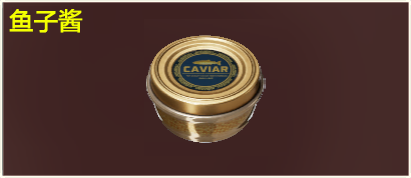
<style>
.page{position:relative;width:411px;height:178px}
.page>*{position:absolute;margin:0}
.t1{font:24px "MicrosoftYaHeiUI";color:#f4ff00;font-weight:bold}
</style>
<div class="page">
<p class="t1" style="left:9px;top:9px;width:74px;height:24px">鱼子酱</p>
</div>
